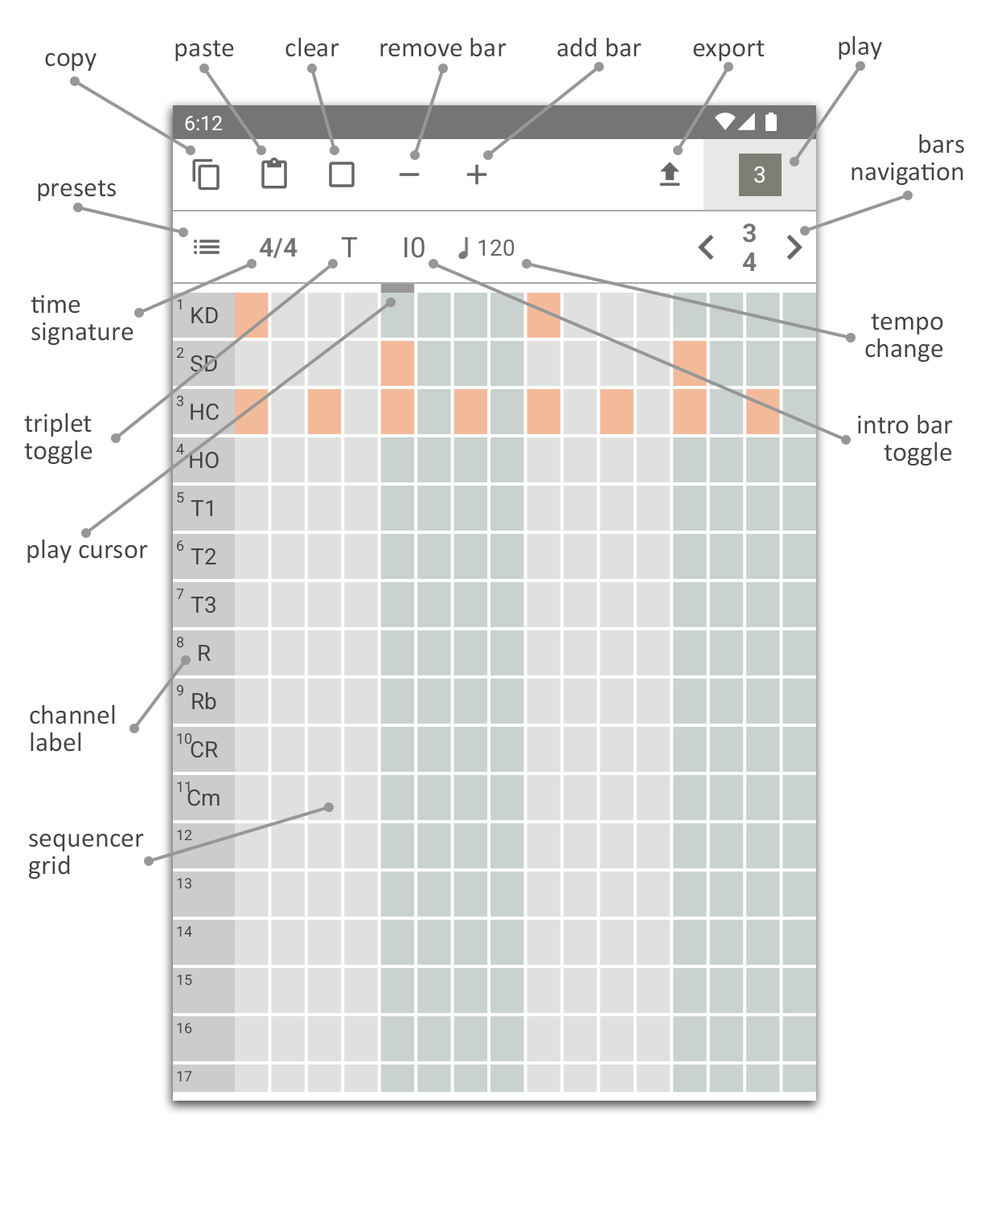
<style>
.page{position:relative;width:989px;height:1206px;background:#ffffff}
.page>*{position:absolute;margin:0}
.t1{font:27.3px "Calibri";color:#454545}
.t2{font:27.3px/27.3px "Calibri";color:#454545}
</style>
<div class="page">
<p class="t1" style="left:175px;top:40px;width:59px;height:21px">paste</p>
<p class="t1" style="left:285px;top:38px;width:54px;height:19px">clear</p>
<p class="t1" style="left:380px;top:38px;width:126px;height:19px">remove bar</p>
<p class="t1" style="left:557px;top:38px;width:85px;height:19px">add bar</p>
<p class="t1" style="left:693px;top:40px;width:72px;height:21px">export</p>
<p class="t1" style="left:838px;top:36px;width:44px;height:23px">play</p>
<p class="t1" style="left:45px;top:53px;width:51px;height:18px">copy</p>
<p class="t2" style="left:851px;top:134px;width:113px;height:51px;text-align:right">bars<br>navigation</p>
<p class="t1" style="left:38px;top:180px;width:78px;height:21px">presets</p>
<p class="t2" style="left:31px;top:295px;width:102px;height:50px">time<br>signature</p>
<p class="t2" style="left:865px;top:314px;width:78px;height:48px;text-align:right">tempo<br>change</p>
<p class="t2" style="left:24px;top:413px;width:68px;height:51px">triplet<br>toggle</p>
<p class="t2" style="left:858px;top:415px;width:95px;height:50px;text-align:right">intro bar<br>toggle</p>
<p class="t1" style="left:27px;top:539px;width:121px;height:24px">play cursor</p>
<p class="t2" style="left:30px;top:705px;width:85px;height:47px">channel<br>label</p>
<p class="t2" style="left:29px;top:834px;width:115px;height:45px">sequencer<br>grid</p>
</div>
